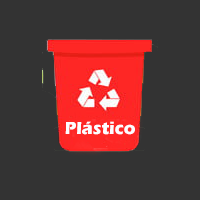
<style>
.page{position:relative;width:200px;height:200px;background:#333333}
.page>*{position:absolute;margin:0}
.t1{font:18px "ErasITC-Bold";color:#fcfdff}
</style>
<div class="page">
<p class="t1" style="left:65px;top:121px;width:70px;height:14px">Plástico</p>
</div>
